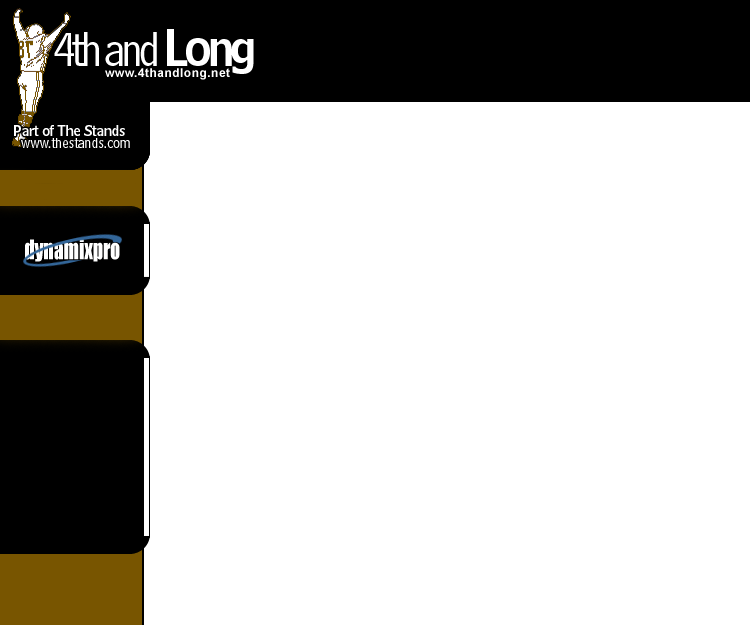
<style>
.page{position:relative;width:750px;height:625px;background:#ffffff}
.page>*{position:absolute;margin:0}
.t1{font:50px "BellCentennial-Address";letter-spacing:-0.1em;color:#ffffff}
.t2{font:50px "BellCentennial-NameAndNumber";letter-spacing:-0.1em;color:#ffffff}
.t3{font:12px "Arial-BoldMT";letter-spacing:0.04em;color:#ffffff}
.t4{font:15px "BellCentennial-NameAndNumber";letter-spacing:-0.04em;color:#ffffff}
.t5{font:15px "BellCentennial-SubCaption";letter-spacing:-0.04em;color:#ffffff}
</style>
<div class="page">
<p class="t1" style="left:54px;top:29px;width:200px;height:45px">4th and<span class="t2"> Long</span></p>
<p class="t3" style="left:105px;top:68px;width:125px;height:12px">www.4thandlong.net</p>
<p class="t4" style="left:14px;top:125px;width:111px;height:11px">Part of The Stands</p>
<p class="t5" style="left:21px;top:138px;width:109px;height:10px">www.thestands.com</p>
</div>
